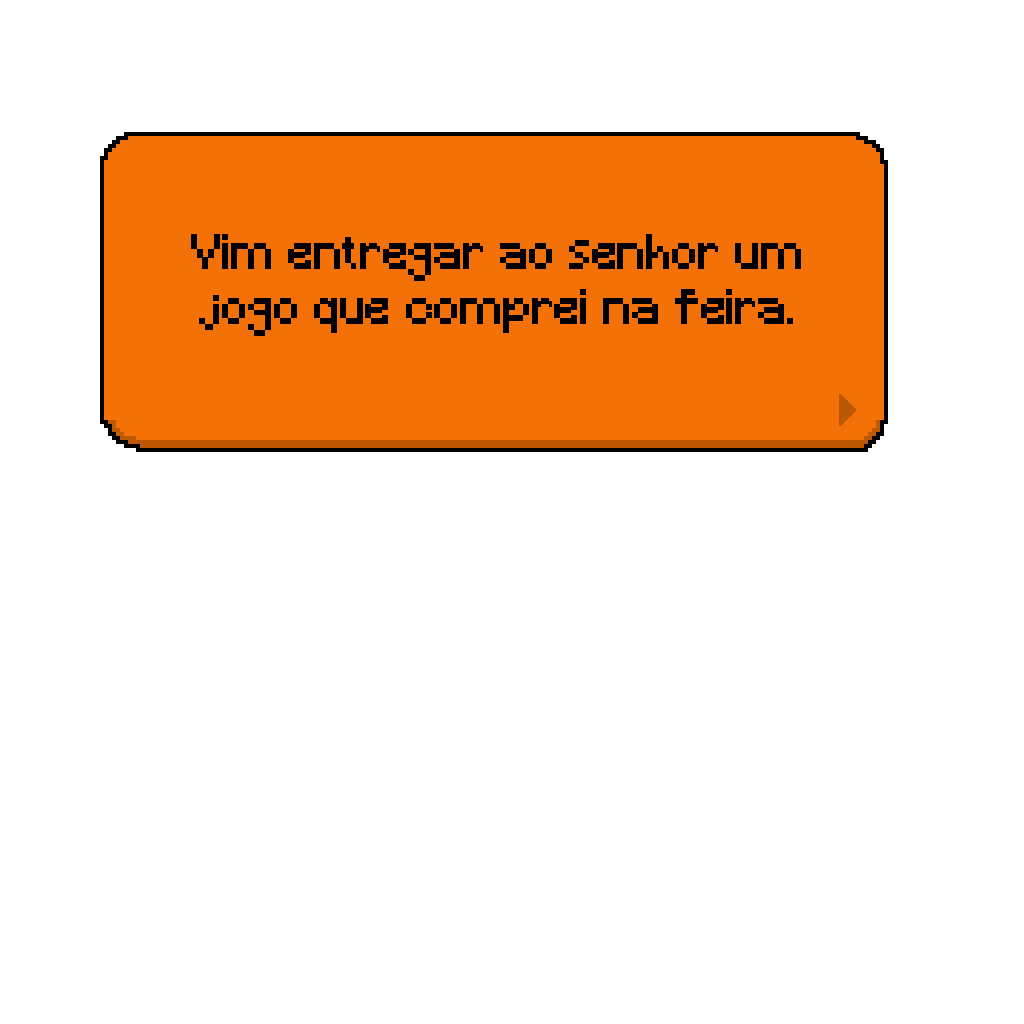
<style>
.page{position:relative;width:1024px;height:1024px;background:#ffffff}
.page>*{position:absolute;margin:0}
.t1{font:45.8px "Minecraft";color:#000000}
</style>
<div class="page">
<p class="t1" style="left:191px;top:234px;width:610px;height:102px;text-align:center">Vim entregar ao senhor um jogo que comprei na feira.</p>
</div>
